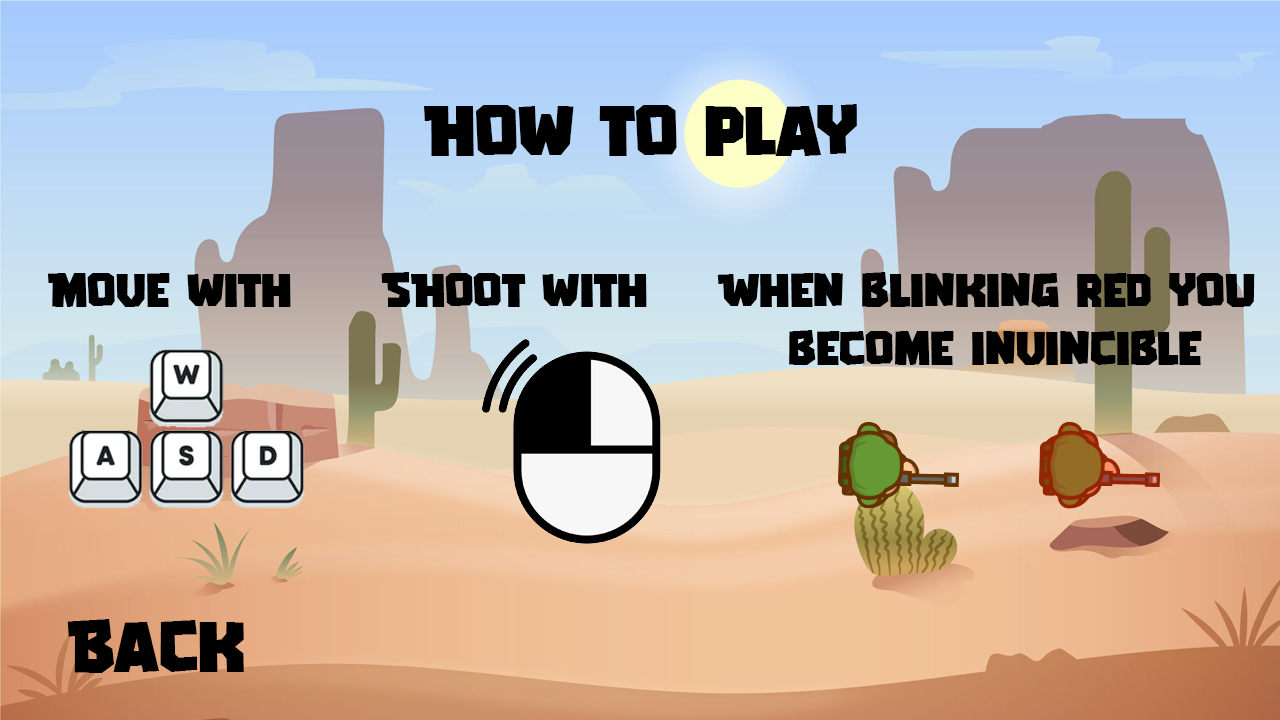
<style>
.page{position:relative;width:1280px;height:720px}
.page>*{position:absolute;margin:0}
.t1{font:72px "GAMERIA";color:#000000}
.t2{font:48px "GAMERIA";color:#000000}
</style>
<div class="page">
<p class="t1" style="left:423px;top:104px;width:434px;height:52px">HOw to play</p>
<p class="t2" style="left:47px;top:273px;width:244px;height:34px">Move with</p>
<p class="t2" style="left:381px;top:272px;width:266px;height:35px">SHOot with</p>
<p class="t2" style="left:717px;top:272px;width:538px;height:93px;text-align:center">When blinking red you <br>become invincible</p>
<p class="t1" style="left:67px;top:619px;width:177px;height:54px">Back</p>
</div>
